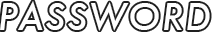
<style>
.page{position:relative;width:213px;height:32px;background:#ffffff}
.page>*{position:absolute;margin:0}
.t1{font:36.2px "Futura-MediumItalic";letter-spacing:0.05em;color:#ffffff;text-transform:uppercase}
</style>
<div class="page">
<p class="t1" style="left:0px;top:1px;width:210px;height:30px">PASSWORD</p>
</div>
